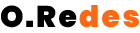
<style>
.page{position:relative;width:140px;height:33px;background:#ffffff}
.page>*{position:absolute;margin:0}
.t1{font:29.9px "Poppins-Black";letter-spacing:0.075em;color:#000000}
.t2{font:29.9px "Poppins-Black";letter-spacing:0.075em;color:#ff6710}
</style>
<div class="page">
<p class="t1" style="left:1px;top:5px;width:138px;height:23px">O.Re<span class="t2">des</span></p>
</div>
